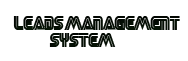
<style>
.page{position:relative;width:188px;height:61px;background:#ffffff}
.page>*{position:absolute;margin:0}
.t1{font:14px "SEGA";letter-spacing:-0.025em;color:#0a1f09}
</style>
<div class="page">
<p class="t1" style="left:13px;top:16px;width:167px;height:31px">Leads management  <br> System</p>
</div>
